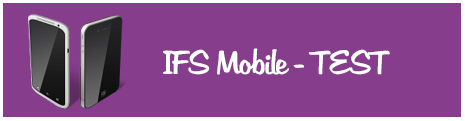
<style>
.page{position:relative;width:465px;height:121px;background:#863d8c}
.page>*{position:absolute;margin:0}
.t1{font:32px "Martina";letter-spacing:-0.06em;color:#ffffff}
</style>
<div class="page">
<p class="t1" style="left:163px;top:48px;width:227px;height:27px">IFS Mobile - TEST</p>
</div>
